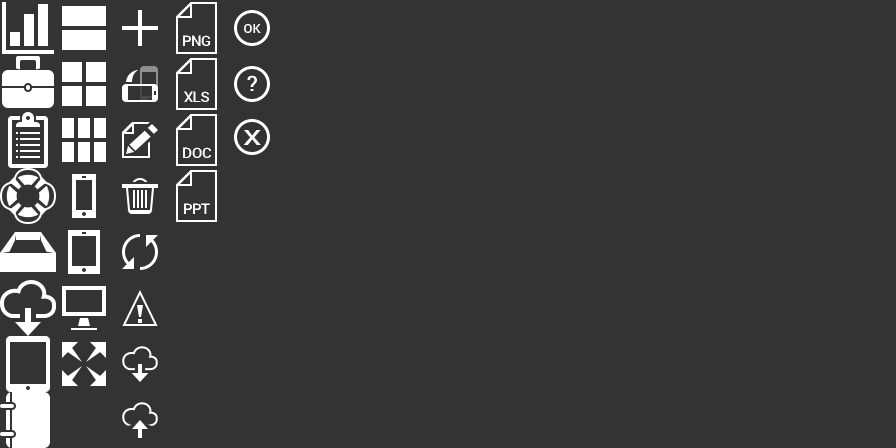
<style>
.page{position:relative;width:896px;height:448px;background:#333333}
.page>*{position:absolute;margin:0}
.t1{font:13px "Roboto-Medium";color:#ffffff}
.t2{font:14.2px "Roboto-Medium";color:#ffffff}
.t3{font:21.3px "Roboto-Medium";color:#ffffff}
.t4{font:21.3px "Roboto-Medium";color:#ffffff;scale:1.37 1}
</style>
<div class="page">
<p class="t1" style="left:244px;top:24px;width:17px;height:9px">OK</p>
<p class="t2" style="left:183px;top:35px;width:28px;height:11px">PNG</p>
<p class="t3" style="left:247px;top:75px;width:10px;height:16px">?</p>
<p class="t2" style="left:184px;top:91px;width:26px;height:11px">XLS</p>
<p class="t4" style="left:243px;top:130px;width:18px;height:15px">X</p>
<p class="t2" style="left:183px;top:147px;width:28px;height:11px">DOC</p>
<p class="t2" style="left:184px;top:203px;width:26px;height:11px">PPT</p>
</div>
